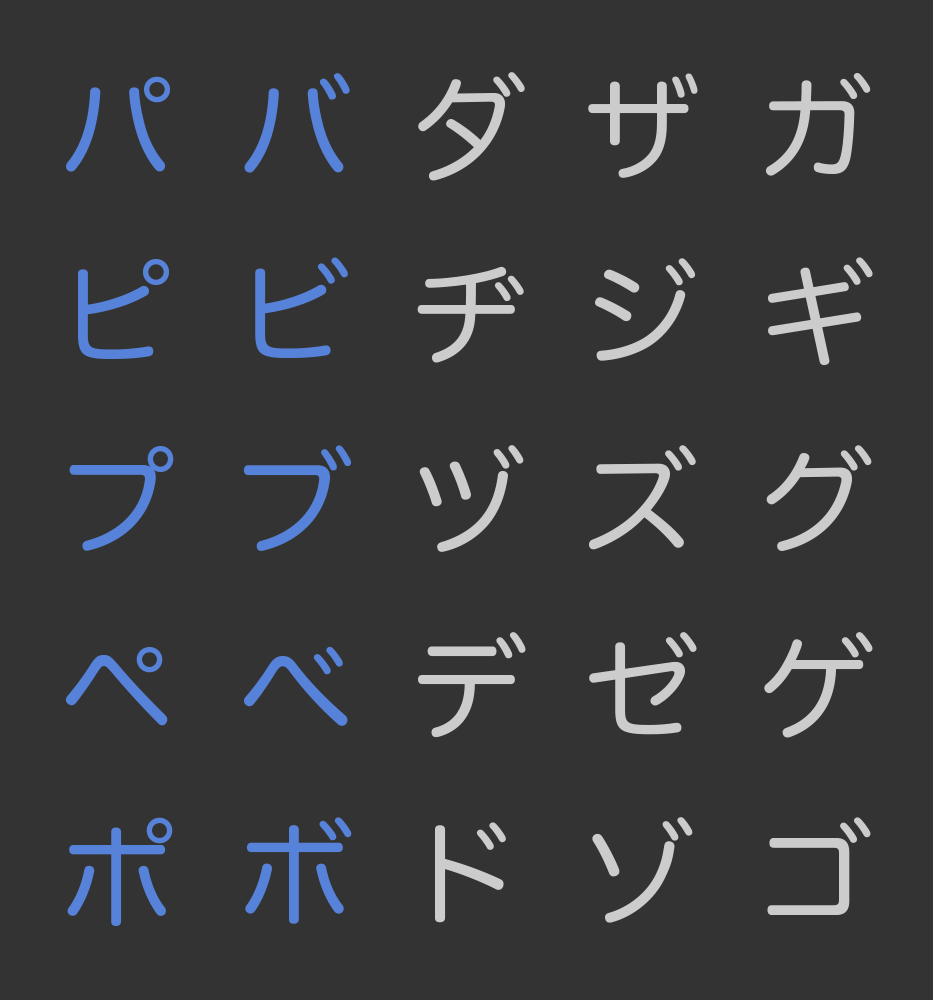
<style>
.page{position:relative;width:933px;height:1000px;background:#333333}
.page>*{position:absolute;margin:0}
.t1{font:113.7px "HiraMaruPro-W4";letter-spacing:0.025em;color:#5782d9}
.t2{font:113.7px "HiraMaruPro-W4";letter-spacing:0.025em;color:#cccccc}
</style>
<div class="page">
<p class="t1" style="left:66px;top:76px;width:105px;height:96px">パ</p>
<p class="t1" style="left:244px;top:73px;width:106px;height:100px">バ</p>
<p class="t2" style="left:418px;top:72px;width:107px;height:109px">ダ</p>
<p class="t2" style="left:588px;top:73px;width:110px;height:105px">ザ</p>
<p class="t2" style="left:765px;top:72px;width:106px;height:104px">ガ</p>
<p class="t1" style="left:255px;top:257px;width:93px;height:101px">ビ</p>
<p class="t2" style="left:767px;top:257px;width:106px;height:109px">ギ</p>
<p class="t1" style="left:78px;top:259px;width:92px;height:100px">ピ</p>
<p class="t2" style="left:417px;top:266px;width:107px;height:97px">ヂ</p>
<p class="t2" style="left:595px;top:258px;width:101px;height:103px">ジ</p>
<p class="t1" style="left:69px;top:446px;width:105px;height:105px">プ</p>
<p class="t1" style="left:243px;top:445px;width:109px;height:106px">ブ</p>
<p class="t2" style="left:419px;top:445px;width:105px;height:107px">ヅ</p>
<p class="t2" style="left:589px;top:445px;width:107px;height:105px">ズ</p>
<p class="t2" style="left:766px;top:445px;width:106px;height:106px">グ</p>
<p class="t2" style="left:418px;top:632px;width:108px;height:106px">デ</p>
<p class="t2" style="left:589px;top:632px;width:108px;height:103px">ゼ</p>
<p class="t2" style="left:764px;top:632px;width:109px;height:106px">ゲ</p>
<p class="t1" style="left:65px;top:647px;width:103px;height:79px">ペ</p>
<p class="t1" style="left:243px;top:646px;width:105px;height:80px">べ</p>
<p class="t1" style="left:67px;top:817px;width:106px;height:109px">ポ</p>
<p class="t1" style="left:245px;top:817px;width:107px;height:107px">ボ</p>
<p class="t2" style="left:435px;top:822px;width:71px;height:101px">ド</p>
<p class="t2" style="left:592px;top:817px;width:101px;height:106px">ゾ</p>
<p class="t2" style="left:767px;top:817px;width:104px;height:98px">ゴ</p>
</div>
